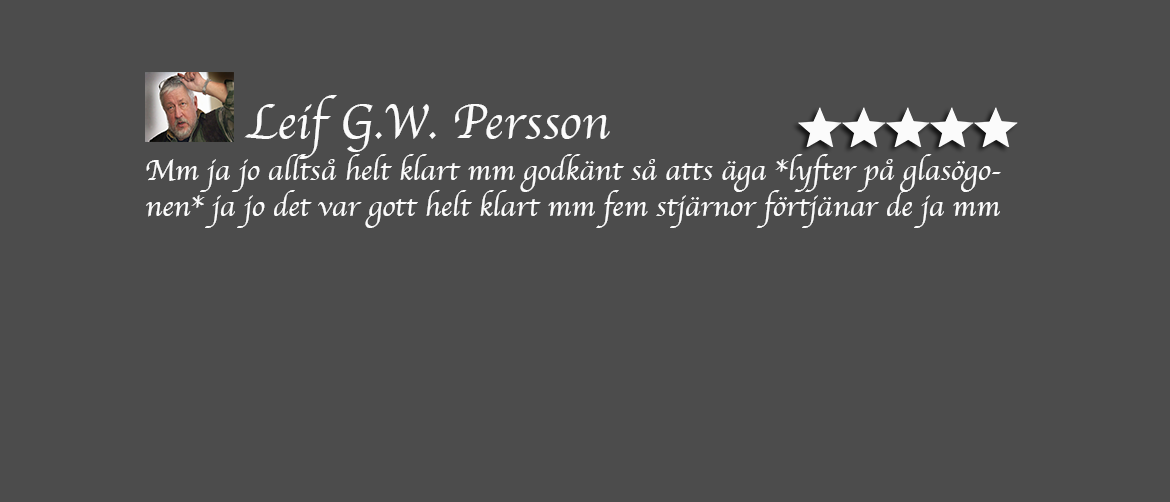
<style>
.page{position:relative;width:1170px;height:502px;background:#4c4c4c}
.page>*{position:absolute;margin:0}
.t1{font:50px "Apple-Chancery";color:#fbfbfb}
.t2{font:30px "Apple-Chancery";color:#fbfbfb}
</style>
<div class="page">
<p class="t1" style="left:244px;top:95px;width:366px;height:64px">Leif G.W. Persson</p>
<p class="t2" style="left:146px;top:154px;width:855px;height:74px">Mm ja jo alltså helt klart mm godkänt så atts äga *lyfter på glasögonen* ja jo det var gott helt klart mm fem stjärnor förtjänar de ja mm</p>
</div>
